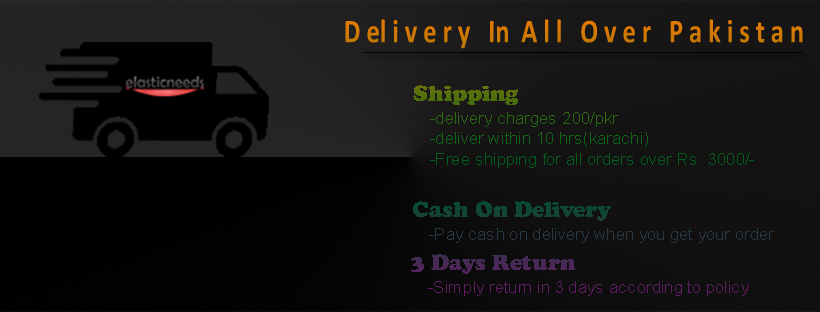
<style>
.page{position:relative;width:820px;height:312px}
.page>*{position:absolute;margin:0}
.t1{font:33.4px "Calibri-Bold";color:#d27903;scale:0.79 1}
.t2{font:23px "CooperBlack";color:#54700b}
.t3{font:17.3px "ArialMT";color:#0b6516}
.t4{font:23px "CooperBlack";color:#104736}
.t5{font:17.3px "ArialMT";color:#293846}
.t6{font:23px "CooperBlack";color:#482957}
.t7{font:17.3px "ArialMT";color:#601d63}
</style>
<div class="page">
<p class="t1" style="left:345px;top:19px;width:458px;height:30px">D el i v e r y   In  A l l   O v e r   P a k i s t a n</p>
<p class="t2" style="left:413px;top:85px;width:105px;height:20px">Shipping</p>
<p class="t3" style="left:430px;top:112px;width:324px;height:56px">-delivery charges 200/pkr<br>-deliver within 10 hrs(karachi)<br>-Free shipping for all orders over Rs: 3000/-</p>
<p class="t4" style="left:413px;top:201px;width:198px;height:20px">Cash On Delivery</p>
<p class="t5" style="left:429px;top:228px;width:345px;height:15px">-Pay cash on delivery when you get your order</p>
<p class="t6" style="left:411px;top:254px;width:164px;height:20px">3 Days Return</p>
<p class="t7" style="left:428px;top:281px;width:321px;height:15px">-Simply return in 3 days according to policy</p>
</div>
